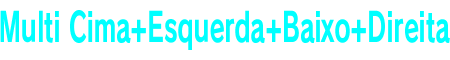
<style>
.page{position:relative;width:450px;height:60px;background:#ffffff}
.page>*{position:absolute;margin:0}
.t1{font:40px "RodinPro-B";color:#00ffff;scale:0.61 1}
</style>
<div class="page">
<p class="t1" style="left:0px;top:10px;width:450px;height:40px">Multi Cima+Esquerda+Baixo+Direita</p>
</div>
